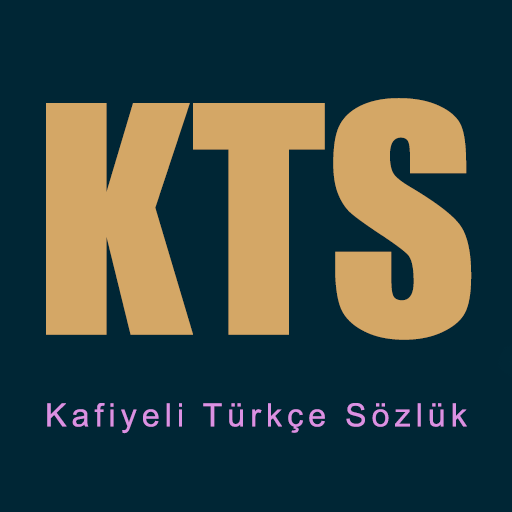
<style>
.page{position:relative;width:512px;height:512px;background:#002635}
.page>*{position:absolute;margin:0}
.t1{font:293px "Impact";color:#d4a766}
.t2{font:32px "ArialMT";letter-spacing:0.16em;color:#db91e3}
</style>
<div class="page">
<p class="t1" style="left:46px;top:98px;width:426px;height:242px">KTS</p>
<p class="t2" style="left:47px;top:403px;width:420px;height:31px">Kafiyeli Türkçe Sözlük</p>
</div>
